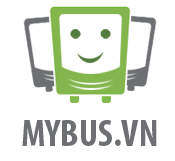
<style>
.page{position:relative;width:175px;height:161px;background:#ffffff}
.page>*{position:absolute;margin:0}
.t1{font:38px "MyriadPro-BoldCond";color:#6d6f72}
</style>
<div class="page">
<p class="t1" style="left:22px;top:120px;width:135px;height:26px">MYBUS.VN</p>
</div>
